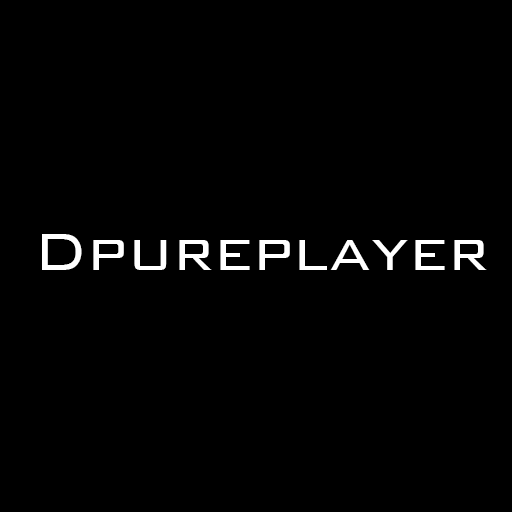
<style>
.page{position:relative;width:512px;height:512px;background:#000000}
.page>*{position:absolute;margin:0}
.t1{font:70.4px "BankGothicBT-Light";color:#ffffff;scale:0.95 1}
</style>
<div class="page">
<p class="t1" style="left:42px;top:234px;width:445px;height:36px">Dpureplayer</p>
</div>
